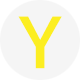
<style>
.page{position:relative;width:80px;height:80px;background:#f5f5f5}
.page>*{position:absolute;margin:0}
.t1{font:75px "DengXian-Bold";color:#fcee21}
</style>
<div class="page">
<p class="t1" style="left:18px;top:16px;width:44px;height:53px">Y</p>
</div>
